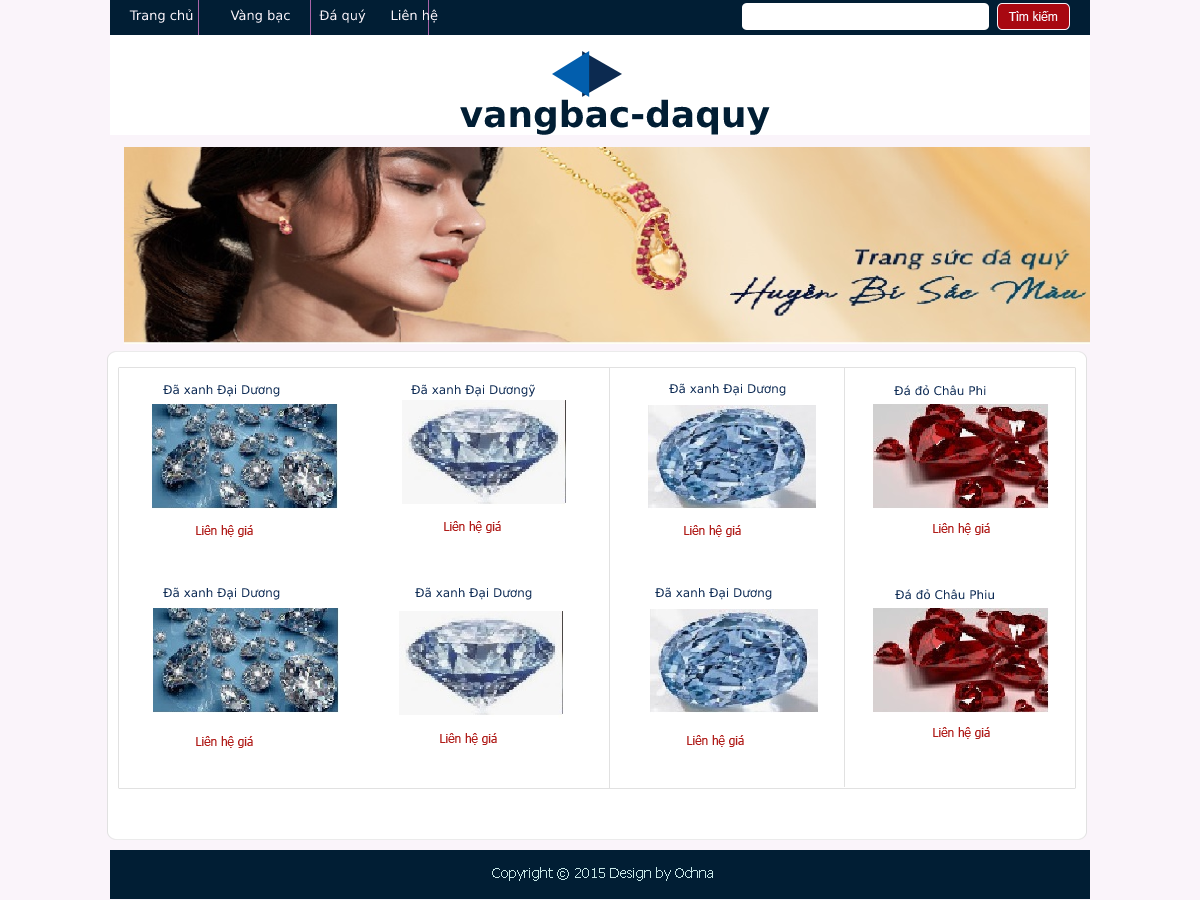
<style>
.page{position:relative;width:1200px;height:900px;background:#ffffff}
.page>*{position:absolute;margin:0}
.t1{font:13px "Tahoma";color:#faf4fa}
.t2{font:12px "Tahoma";color:#faf4fa}
.t3{font:36px "UTMDuepuntozeroBold";color:#011e34}
.t4{font:12px "Tahoma";color:#0f2c55}
.t5{font:12px "Tahoma";color:#b01c19}
.t6{font:14px "Tahoma";color:#c7e8e8}
</style>
<div class="page">
<p class="t1" style="left:129px;top:9px;width:309px;height:14px">Trang chủ         Vàng bạc       Đá quý      Liên hệ</p>
<p class="t2" style="left:1008px;top:11px;width:50px;height:10px">Tìm kiếm</p>
<p class="t3" style="left:460px;top:99px;width:310px;height:36px">vangbac-daquy</p>
<p class="t4" style="left:163px;top:384px;width:117px;height:13px">Đã xanh Đại Dương</p>
<p class="t4" style="left:411px;top:384px;width:125px;height:13px">Đã xanh Đại Dươngỹ</p>
<p class="t4" style="left:669px;top:383px;width:117px;height:13px">Đã xanh Đại Dương</p>
<p class="t4" style="left:894px;top:385px;width:92px;height:11px">Đá đỏ Châu Phi</p>
<p class="t5" style="left:444px;top:521px;width:57px;height:12px">Liên hệ giá</p>
<p class="t5" style="left:196px;top:525px;width:57px;height:12px">Liên hệ giá</p>
<p class="t5" style="left:684px;top:525px;width:57px;height:12px">Liên hệ giá</p>
<p class="t5" style="left:933px;top:523px;width:57px;height:12px">Liên hệ giá</p>
<p class="t4" style="left:163px;top:587px;width:117px;height:13px">Đã xanh Đại Dương</p>
<p class="t4" style="left:415px;top:587px;width:117px;height:13px">Đã xanh Đại Dương</p>
<p class="t4" style="left:655px;top:587px;width:117px;height:13px">Đã xanh Đại Dương</p>
<p class="t4" style="left:895px;top:589px;width:99px;height:11px">Đá đỏ Châu Phiu</p>
<p class="t5" style="left:196px;top:736px;width:57px;height:12px">Liên hệ giá</p>
<p class="t5" style="left:440px;top:733px;width:57px;height:12px">Liên hệ giá</p>
<p class="t5" style="left:687px;top:735px;width:57px;height:12px">Liên hệ giá</p>
<p class="t5" style="left:933px;top:727px;width:57px;height:12px">Liên hệ giá</p>
<p class="t6" style="left:492px;top:867px;width:221px;height:14px">Copyright © 2015 Design by Ochna</p>
</div>
